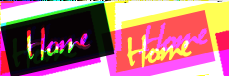
<style>
.page{position:relative;width:229px;height:76px}
.page>*{position:absolute;margin:0}
.t1{font:43px "Mistral";letter-spacing:-0.075em}
</style>
<div class="page">
<p class="t1" style="left:26px;top:24px;width:65px;height:34px;rotate:-9deg">Home</p>
</div>
